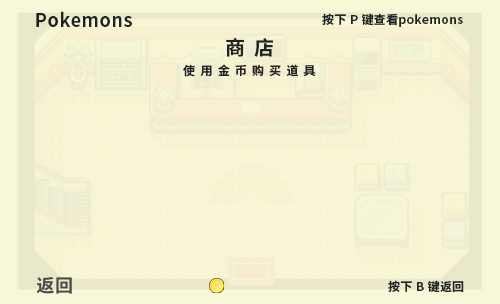
<style>
.page{position:relative;width:500px;height:304px}
.page>*{position:absolute;margin:0}
.t1{font:18px "SourceHanSansCN-Bold";letter-spacing:0.03em;color:#222222}
.t2{font:12px "SourceHanSansCN-Bold";letter-spacing:0.03em;color:#222222}
.t3{font:20px "SourceHanSansCN-Bold";letter-spacing:0.43em;color:#222222}
.t4{font:12px "SourceHanSansCN-Bold";letter-spacing:0.43em;color:#222222}
.t5{font:18px "SourceHanSansCN-Bold";letter-spacing:0.03em;color:#4a494a}
</style>
<div class="page">
<p class="t1" style="left:36px;top:11px;width:96px;height:16px">Pokemons</p>
<p class="t2" style="left:322px;top:13px;width:141px;height:14px">按下 P 键查看pokemons</p>
<p class="t3" style="left:226px;top:38px;width:48px;height:19px">商店</p>
<p class="t4" style="left:183px;top:64px;width:133px;height:13px">使用金币购买道具</p>
<p class="t5" style="left:36px;top:276px;width:36px;height:18px">返回</p>
<p class="t2" style="left:388px;top:280px;width:76px;height:13px">按下 B 键返回</p>
</div>
